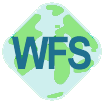
<style>
.page{position:relative;width:104px;height:103px;background:#ffffff}
.page>*{position:absolute;margin:0}
.t1{font:45px "Arial-BoldMT";letter-spacing:-0.075em;color:#1f708f;scale:0.87 1}
</style>
<div class="page">
<p class="t1" style="left:12px;top:36px;width:79px;height:34px">WFS</p>
</div>
